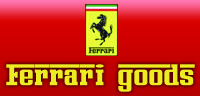
<style>
.page{position:relative;width:200px;height:96px}
.page>*{position:absolute;margin:0}
.t1{font:27px "FerroRosso";color:#edec22;font-weight:bold}
</style>
<div class="page">
<p class="t1" style="left:6px;top:64px;width:189px;height:28px">Ferrari  goods</p>
</div>
